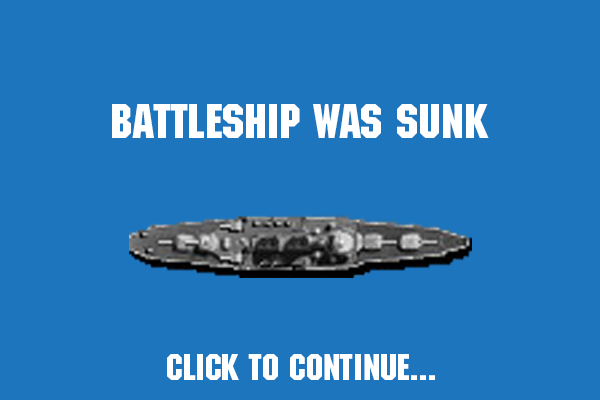
<style>
.page{position:relative;width:600px;height:400px;background:#1d75bd}
.page>*{position:absolute;margin:0}
.t1{font:48px "MachineStd";color:#ffffff}
.t2{font:36px "MachineStd";color:#ffffff}
</style>
<div class="page">
<p class="t1" style="left:112px;top:104px;width:377px;height:34px">BAttleShip was sunk</p>
<p class="t2" style="left:167px;top:354px;width:268px;height:26px">Click to continue...</p>
</div>
